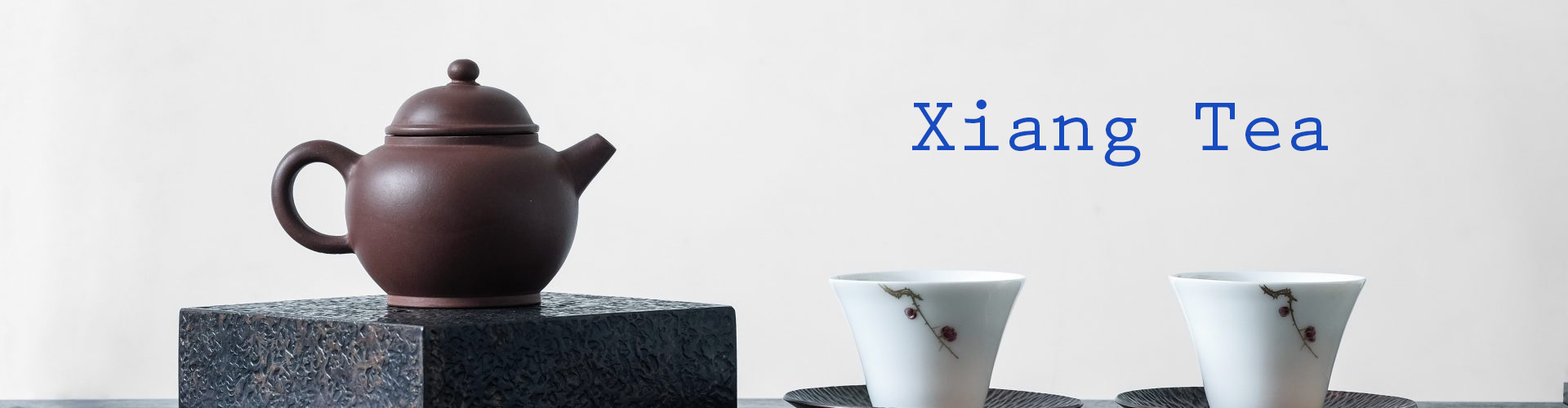
<style>
.page{position:relative;width:1568px;height:408px}
.page>*{position:absolute;margin:0}
.t1{font:78.4px "PrestigeEliteStd-Bd";color:#174bbf}
</style>
<div class="page">
<p class="t1" style="left:912px;top:100px;width:416px;height:67px">Xiang Tea</p>
</div>
